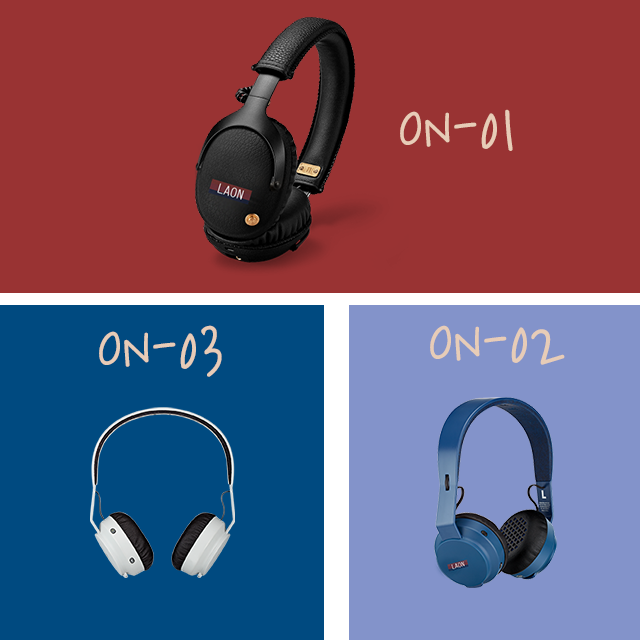
<style>
.page{position:relative;width:640px;height:640px;background:#993333}
.page>*{position:absolute;margin:0}
.t1{font:70px "SDBaikzongyulPen-bMd";color:#e7ccb7}
</style>
<div class="page">
<p class="t1" style="left:400px;top:109px;width:113px;height:42px">ON-01</p>
<p class="t1" style="left:99px;top:325px;width:123px;height:52px">ON-03</p>
<p class="t1" style="left:430px;top:325px;width:135px;height:40px">ON-02</p>
</div>
